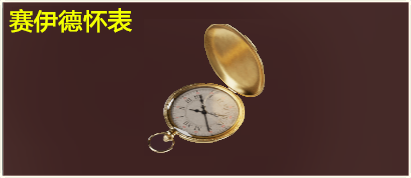
<style>
.page{position:relative;width:411px;height:178px}
.page>*{position:absolute;margin:0}
.t1{font:24px "MicrosoftYaHeiUI";color:#f4ff00;font-weight:bold}
</style>
<div class="page">
<p class="t1" style="left:9px;top:8px;width:123px;height:25px">赛伊德怀表</p>
</div>
